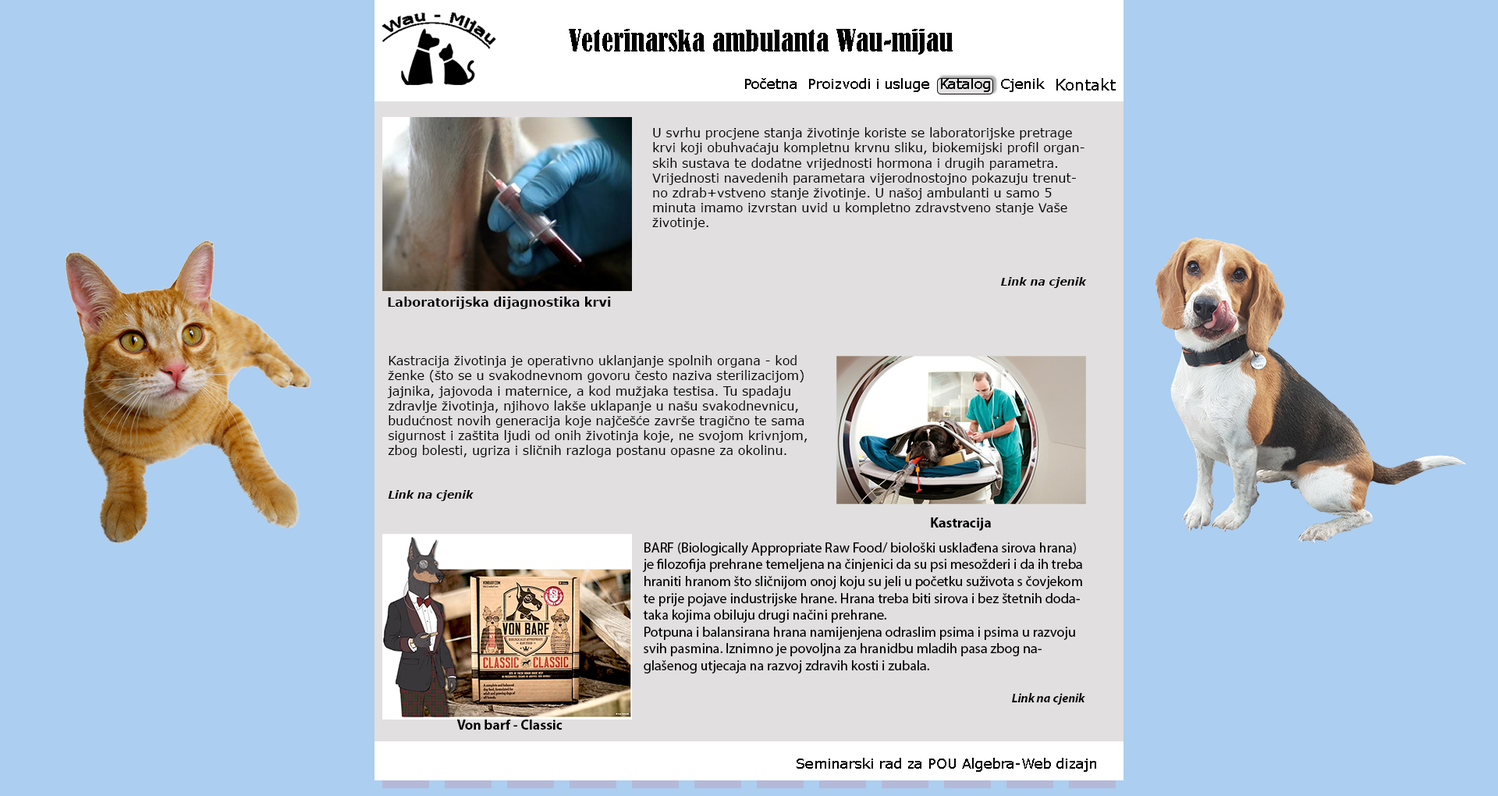
<style>
.page{position:relative;width:1498px;height:796px;background:#accef0}
.page>*{position:absolute;margin:0}
.t1{font:28.1px "BernardMT-Condensed";color:#000000}
.t2{font:14px "Verdana";color:#000000}
.t3{font:15.6px "Verdana";color:#000000}
.t4{font:12.5px "Verdana";color:#000000}
.t5{font:10.9px "Verdana-BoldItalic";color:#000000}
.t6{font:12.5px "Verdana-Bold";color:#000000}
.t7{font:14px "MyriadPro-Bold";color:#000000}
.t8{font:14px "MyriadPro-Regular";color:#000000}
.t9{font:12.5px "MyriadPro-BoldIt";color:#000000}
</style>
<div class="page">
<p class="t1" style="left:569px;top:29px;width:384px;height:26px">Veterinarska ambulanta Wau-mijau</p>
<p class="t2" style="left:745px;top:78px;width:52px;height:11px">Početna</p>
<p class="t2" style="left:809px;top:78px;width:120px;height:14px">Proizvodi i usluge</p>
<p class="t2" style="left:941px;top:78px;width:49px;height:14px">Katalog</p>
<p class="t2" style="left:1001px;top:78px;width:44px;height:14px">Cjenik</p>
<p class="t3" style="left:1057px;top:78px;width:59px;height:13px">Kontakt</p>
<p class="t4" style="left:652px;top:127px;width:435px;height:161px">U svrhu procjene stanja životinje koriste se laboratorijske pretrage krvi koji obuhvaćaju kompletnu krvnu sliku, biokemijski profil organskih sustava te dodatne vrijednosti hormona i drugih parametra. Vrijednosti navedenih parametara vijerodnostojno pokazuju trenutno zdrab+vstveno stanje životinje. U našoj ambulanti u samo 5 minuta imamo izvrstan uvid u kompletno zdravstveno stanje Vaše životinje.<br><br><br><br><span class="t5">Link na cjenik</span></p>
<p class="t6" style="left:388px;top:297px;width:223px;height:12px">Laboratorijska dijagnostika krvi</p>
<p class="t4" style="left:387px;top:355px;width:421px;height:146px">Kastracija životinja je operativno uklanjanje spolnih organa - kod ženke (što se u svakodnevnom govoru često naziva sterilizacijom) jajnika, jajovoda i maternice, a kod mužjaka testisa. Tu spadaju zdravlje životinja, njihovo lakše uklapanje u našu svakodnevnicu, budućnost novih generacija koje najčešće završe tragično te sama sigurnost i zaštita ljudi od onih životinja koje, ne svojom krivnjom, zbog bolesti, ugriza i sličnih razloga postanu opasne za okolinu.<br><br><br><span class="t5">Link na cjenik</span></p>
<p class="t7" style="left:931px;top:517px;width:60px;height:14px">Kastracija</p>
<p class="t8" style="left:642px;top:542px;width:443px;height:163px">BARF (Biologically Appropriate Raw Food/ biološki usklađena sirova hrana) je filozofija prehrane temeljena na činjenici da su psi mesožderi i da ih treba hraniti hranom što sličnijom onoj koju su jeli u početku suživota s čovjekom te prije pojave industrijske hrane. Hrana treba biti sirova i bez štetnih dodataka kojima obiluju drugi načini prehrane.<br>Potpuna i balansirana hrana namijenjena odraslim psima i psima u razvoju svih pasmina. Iznimno je povoljna za hranidbu mladih pasa zbog naglašenog utjecaja na razvoj zdravih kosti i zubala.<br><br><span class="t9">Link na cjenik</span></p>
<p class="t7" style="left:456px;top:719px;width:107px;height:11px">Von barf - Classic</p>
<p class="t2" style="left:797px;top:758px;width:299px;height:14px">Seminarski rad za POU Algebra-Web dizajn</p>
</div>
